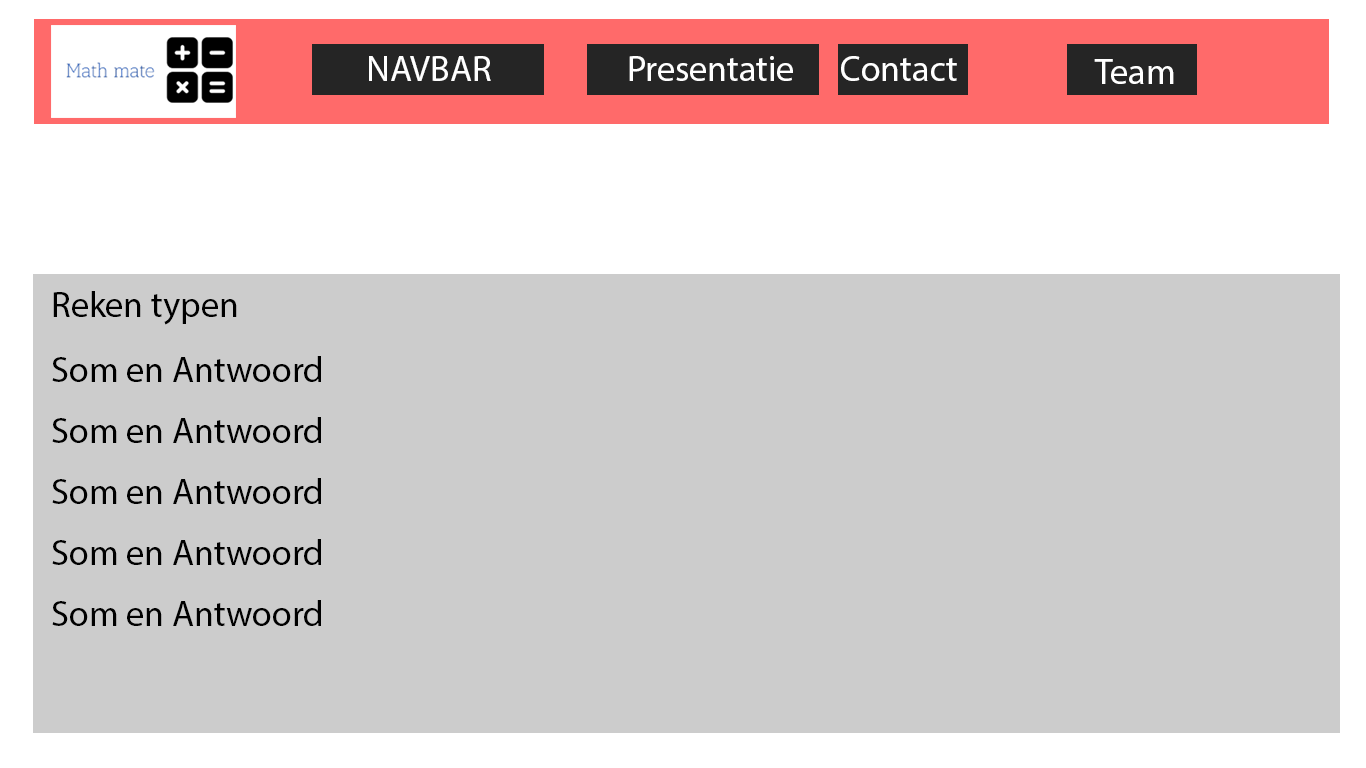
<style>
.page{position:relative;width:1366px;height:768px;background:#cccccc}
.page>*{position:absolute;margin:0}
.t1{font:36px "MyriadPro-Regular";color:#ffffff}
.t2{font:36px "MyriadPro-Regular";color:#000000}
</style>
<div class="page">
<p class="t1" style="left:369px;top:56px;width:122px;height:25px">NAVBAR</p>
<p class="t1" style="left:629px;top:56px;width:164px;height:25px">Presentatie</p>
<p class="t1" style="left:841px;top:56px;width:116px;height:25px">Contact</p>
<p class="t1" style="left:1094px;top:59px;width:80px;height:25px">Team</p>
<p class="t2" style="left:53px;top:291px;width:184px;height:34px">Reken typen</p>
<p class="t2" style="left:52px;top:356px;width:269px;height:26px">Som en Antwoord</p>
<p class="t2" style="left:52px;top:417px;width:269px;height:26px">Som en Antwoord</p>
<p class="t2" style="left:52px;top:478px;width:269px;height:26px">Som en Antwoord</p>
<p class="t2" style="left:52px;top:539px;width:269px;height:26px">Som en Antwoord</p>
<p class="t2" style="left:52px;top:600px;width:269px;height:26px">Som en Antwoord</p>
</div>
